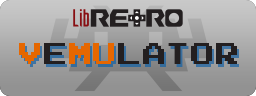
<style>
.page{position:relative;width:256px;height:96px}
.page>*{position:absolute;margin:0}
.t1{font:30px "JoystixMonospace-Regular";color:#231f20}
.t2{font:30px "JoystixMonospace-Regular";color:#e66700}
.t3{font:30px "JoystixMonospace-Regular"}
</style>
<div class="page">
<p class="t1" style="left:19px;top:43px;width:218px;height:21px"><span class="t2">V</span>E<span class="t2">MU</span>LATOR</p>
<p class="t3" style="left:21px;top:46px;width:218px;height:21px">VEMULATOR</p>
</div>
